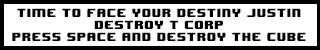
<style>
.page{position:relative;width:320px;height:50px;background:#ffffff}
.page>*{position:absolute;margin:0}
.t1{font:10px "8BITWONDERNominal";color:#000000}
</style>
<div class="page">
<p class="t1" style="left:12px;top:8px;width:294px;height:33px;text-align:center">TIME TO FACE YOUR DESTINY JUSTIN<br>DESTROY T CORP<br>PRESS SPACE AND DESTROY THE CUBE</p>
</div>
